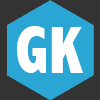
<style>
.page{position:relative;width:100px;height:100px;background:#29a6d3}
.page>*{position:absolute;margin:0}
.t1{font:68px "AbadiMT-CondensedExtraBold";color:#fefefe}
</style>
<div class="page">
<p class="t1" style="left:17px;top:26px;width:66px;height:47px">GK</p>
</div>
